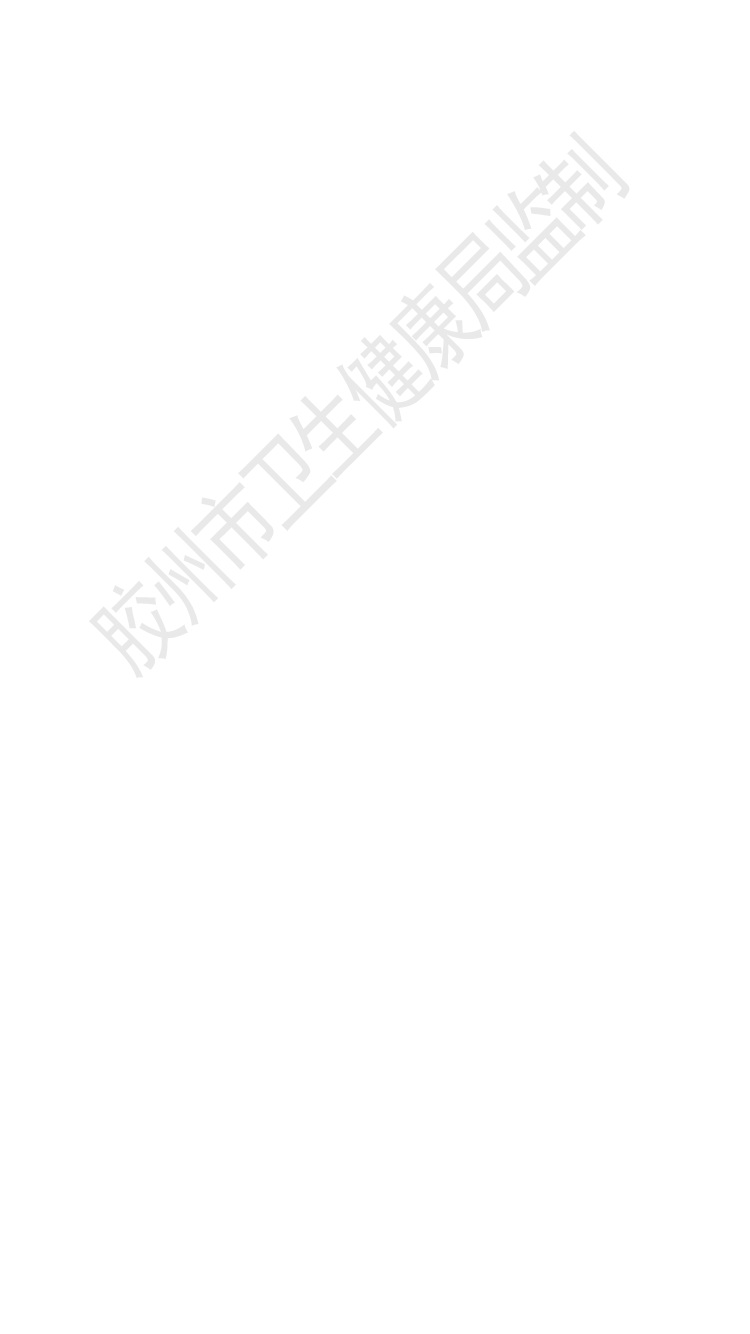
<style>
.page{position:relative;width:750px;height:1334px;background:#ffffff}
.page>*{position:absolute;margin:0}
.t1{font:94.6px "SimHei";letter-spacing:-0.1em;color:#e9e9e9;scale:0.82 1}
</style>
<div class="page">
<p class="t1" style="left:89px;top:130px;width:541px;height:548px;rotate:-45deg">胶州市卫生健康局监制</p>
</div>
